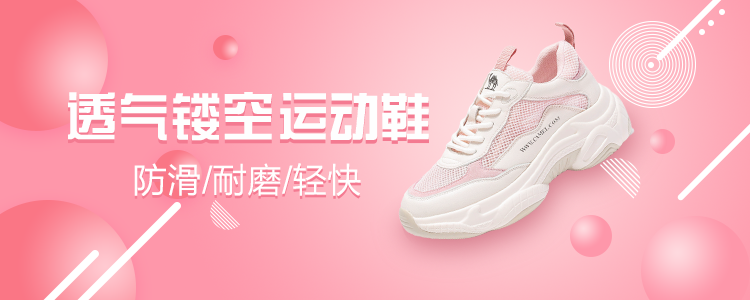
<style>
.page{position:relative;width:750px;height:300px}
.page>*{position:absolute;margin:0}
.t1{font:52.4px "FZZYJW--GB1-0";color:#fefefe}
.t2{font:34.9px "FZLTHJW--GB1-0";color:#ffffff}
</style>
<div class="page">
<p class="t1" style="left:68px;top:92px;width:361px;height:49px">透气镂空运动鞋</p>
<p class="t2" style="left:134px;top:163px;width:227px;height:33px">防滑/耐磨/轻快</p>
</div>
